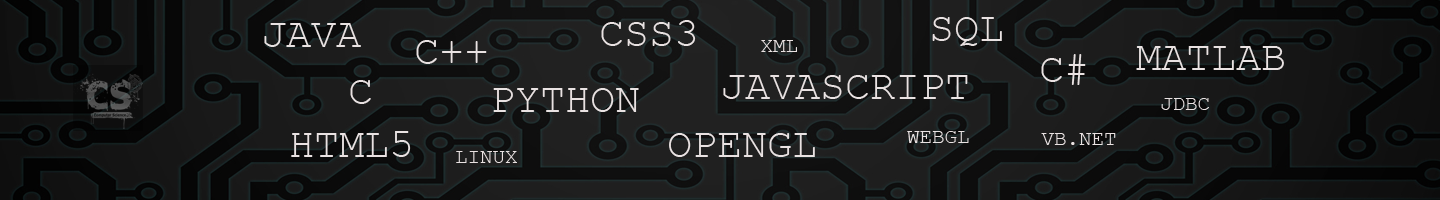
<style>
.page{position:relative;width:1440px;height:200px}
.page>*{position:absolute;margin:0}
.t1{font:41.7px "CourierNewPSMT";color:#e9e2e2}
.t2{font:20.8px "CourierNewPSMT";color:#e9e2e2}
</style>
<div class="page">
<p class="t1" style="left:932px;top:17px;width:70px;height:29px">SQL</p>
<p class="t1" style="left:264px;top:23px;width:97px;height:24px">JAVA</p>
<p class="t1" style="left:601px;top:20px;width:95px;height:26px">CSS3</p>
<p class="t1" style="left:416px;top:40px;width:71px;height:24px">C++</p>
<p class="t2" style="left:761px;top:40px;width:36px;height:12px">XML</p>
<p class="t1" style="left:1041px;top:54px;width:45px;height:31px">C#</p>
<p class="t1" style="left:1136px;top:46px;width:148px;height:24px">MATLAB</p>
<p class="t1" style="left:723px;top:75px;width:245px;height:24px">JAVASCRIPT</p>
<p class="t1" style="left:350px;top:80px;width:21px;height:24px">C</p>
<p class="t1" style="left:493px;top:88px;width:146px;height:24px">PYTHON</p>
<p class="t2" style="left:1161px;top:98px;width:48px;height:12px">JDBC</p>
<p class="t1" style="left:291px;top:131px;width:120px;height:26px">HTML5</p>
<p class="t1" style="left:669px;top:133px;width:146px;height:24px">OPENGL</p>
<p class="t2" style="left:907px;top:131px;width:62px;height:12px">WEBGL</p>
<p class="t2" style="left:1041px;top:133px;width:75px;height:12px">VB.NET</p>
<p class="t2" style="left:456px;top:151px;width:61px;height:12px">LINUX</p>
</div>
